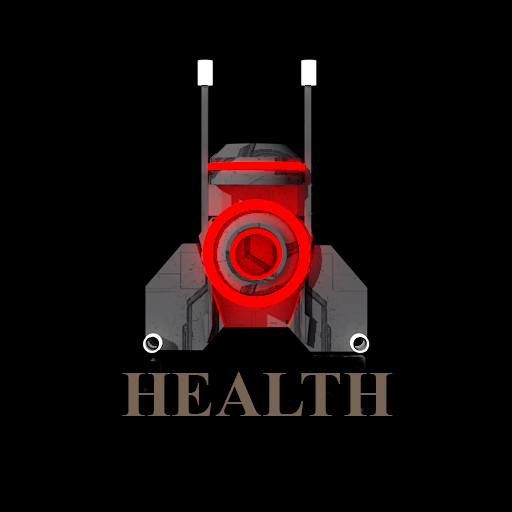
<style>
.page{position:relative;width:512px;height:512px;background:#000000}
.page>*{position:absolute;margin:0}
.t1{font:65px "TimesNewRomanPS-BoldMT";color:#766454}
</style>
<div class="page">
<p class="t1" style="left:122px;top:372px;width:271px;height:44px">HEALTH</p>
</div>
